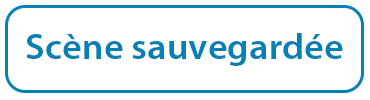
<style>
.page{position:relative;width:370px;height:100px;background:#ffffff}
.page>*{position:absolute;margin:0}
.t1{font:36px "MyriadPro-Semibold";color:#0780b5;scale:1.06 1}
</style>
<div class="page">
<p class="t1" style="left:26px;top:33px;width:317px;height:33px">Scène sauvegardée</p>
</div>
